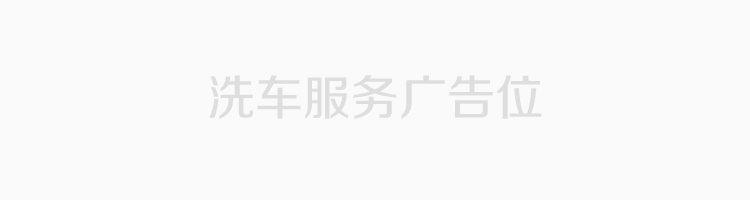
<style>
.page{position:relative;width:750px;height:200px;background:#fafafa}
.page>*{position:absolute;margin:0}
.t1{font:48px "FZZZHUNHJW--GB1-0";color:#dedede}
</style>
<div class="page">
<p class="t1" style="left:209px;top:75px;width:333px;height:44px">洗车服务广告位</p>
</div>
